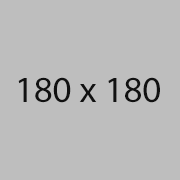
<style>
.page{position:relative;width:180px;height:180px;background:#bebebe}
.page>*{position:absolute;margin:0}
.t1{font:37px "MyriadPro-Regular";color:#111111}
</style>
<div class="page">
<p class="t1" style="left:18px;top:77px;width:142px;height:26px">180 x 180</p>
</div>
